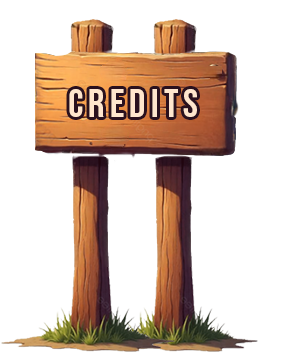
<style>
.page{position:relative;width:292px;height:352px;background:#ffffff}
.page>*{position:absolute;margin:0}
.t1{font:40px "BebasNeue-Regular";letter-spacing:0.13em;color:#ffe6cd}
</style>
<div class="page">
<p class="t1" style="left:69px;top:89px;width:128px;height:28px">Credits</p>
</div>
